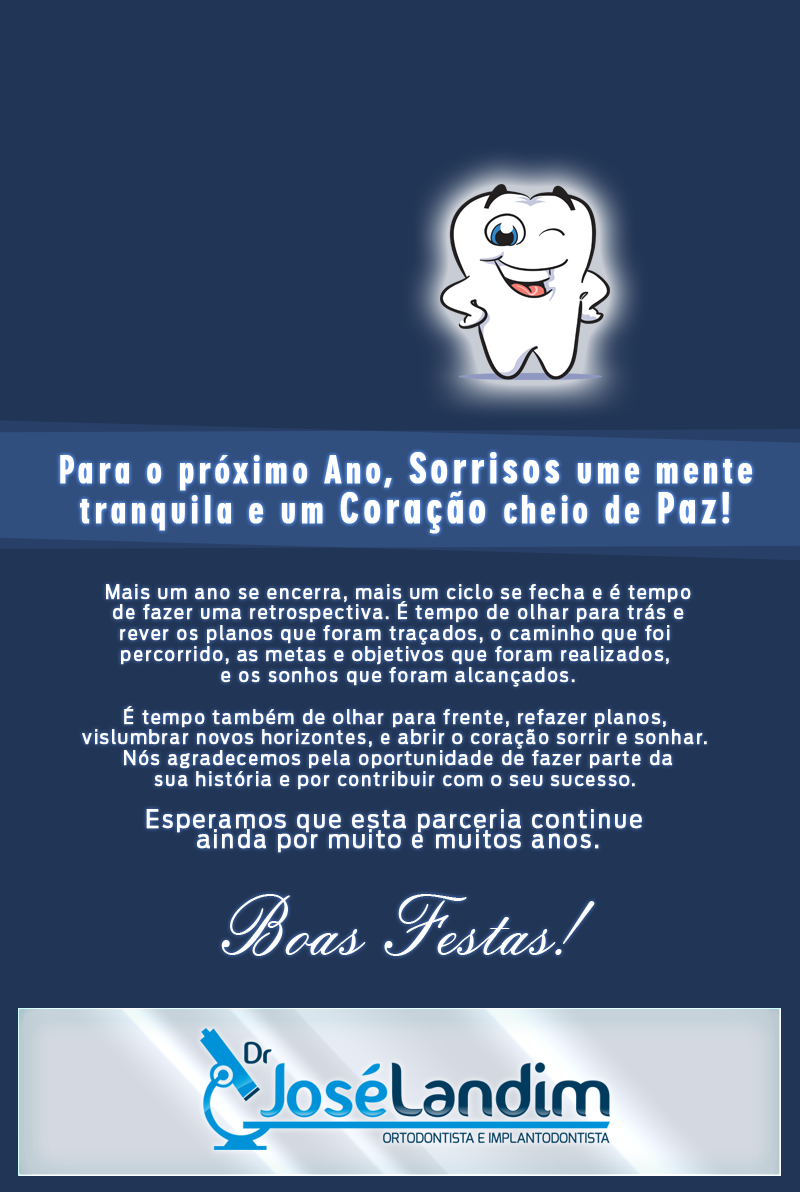
<style>
.page{position:relative;width:800px;height:1192px;background:#213556}
.page>*{position:absolute;margin:0}
.t1{font:36.3px/39.6px "Geometric706BT-BlackCondensedB";letter-spacing:0.1em;color:#ffffff;font-weight:bold;scale:0.9 1}
.t2{font:41px/41px "Geometric706BT-BlackCondensedB";letter-spacing:0.1em;color:#ffffff;font-weight:bold;scale:0.9 1}
.t3{font:41px/39.6px "Geometric706BT-BlackCondensedB";letter-spacing:0.1em;color:#ffffff;font-weight:bold;scale:0.9 1}
.t4{font:19.1px/20.8px "FordAntenna-Regular";letter-spacing:0.1em;color:#ffffff;font-weight:bold;scale:0.86 1}
.t5{font:24.6px/20.8px "FordAntenna-Regular";letter-spacing:0.1em;color:#ffffff;font-weight:bold;scale:0.86 1}
.t6{font:83.9px "EmbassyBT-Regular";color:#ffffff;scale:0.9 1}
</style>
<div class="page">
<p class="t1" style="left:60px;top:452px;width:693px;height:82px;text-align:center">Para o próximo Ano, <span class="t2">Sorrisos</span> ume mente<br>tranquila e um <span class="t3">Coração</span> cheio de <span class="t3">Paz!</span></p>
<p class="t4" style="left:82px;top:584px;width:625px;height:269px;text-align:center">Mais um ano se encerra, mais um ciclo se fecha e é tempo<br> de fazer uma retrospectiva. É tempo de olhar para trás e <br>rever os planos que foram traçados, o caminho que foi <br>percorrido, as metas e objetivos que foram realizados, <br>e os sonhos que foram alcançados.<br><br>É tempo também de olhar para frente, refazer planos, <br>vislumbrar novos horizontes, e abrir o coração sorrir e sonhar. <br>Nós agradecemos pela oportunidade de fazer parte da<br>sua história e por contribuir com o seu sucesso. <br><br><span class="t5">Esperamos que esta parceria continue <br>ainda por muito e muitos anos.</span></p>
<p class="t6" style="left:221px;top:894px;width:374px;height:62px">Boas Festas!</p>
</div>
